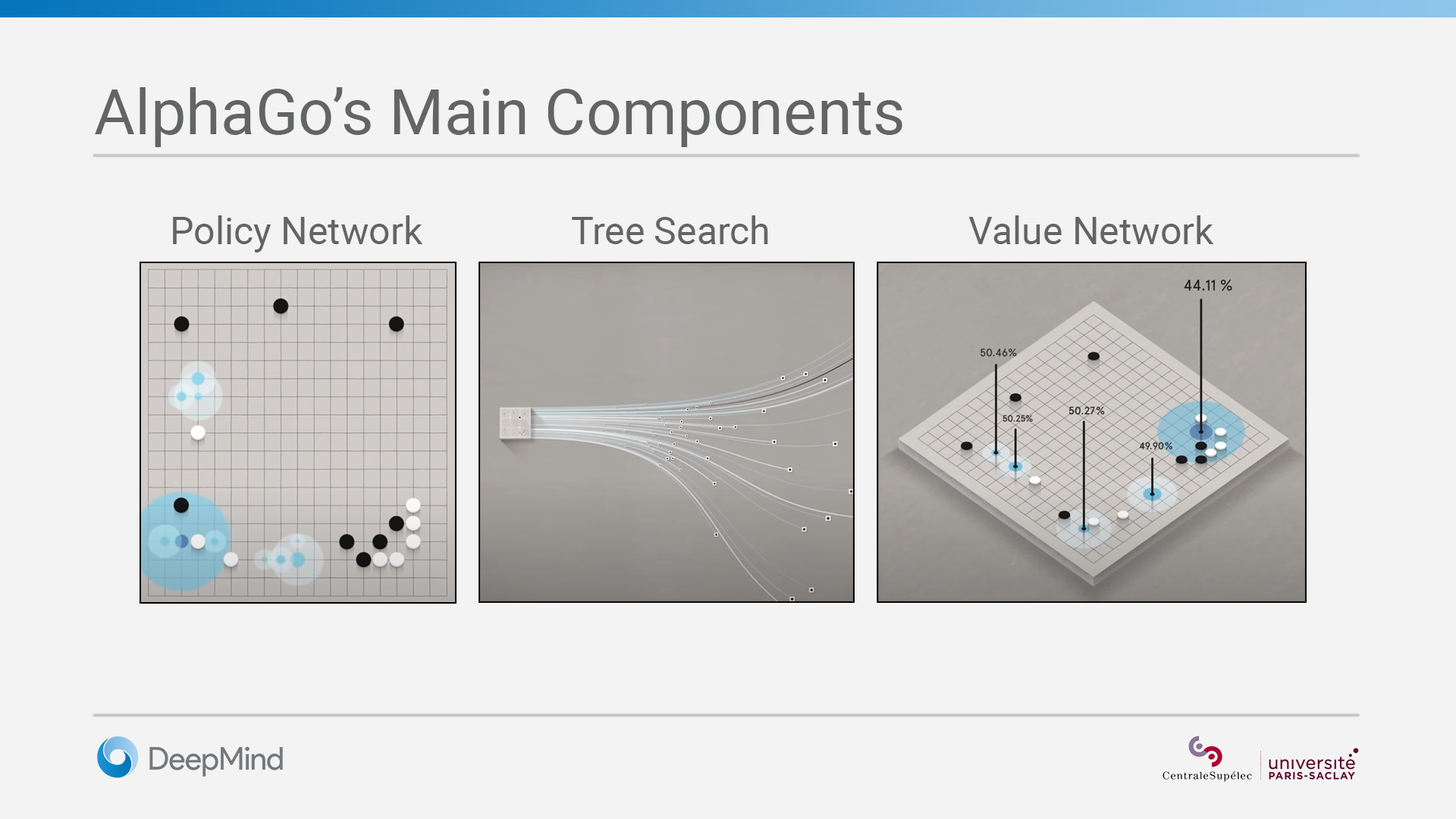
<style>
.page{position:relative;width:1456px;height:819px;background:#f3f3f3}
.page>*{position:absolute;margin:0}
.t1{font:63.2px "Roboto-Regular";color:#636464}
.t2{font:37.9px "Roboto-Regular";color:#636464}
</style>
<div class="page">
<p class="t1" style="left:95px;top:87px;width:807px;height:60px">AlphaGo’s Main Components</p>
<p class="t2" style="left:173px;top:215px;width:250px;height:38px">Policy Network</p>
<p class="t2" style="left:572px;top:215px;width:196px;height:29px">Tree Search</p>
<p class="t2" style="left:968px;top:215px;width:246px;height:29px">Value Network</p>
</div>
